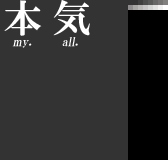
<style>
.page{position:relative;width:168px;height:160px;background:#333333}
.page>*{position:absolute;margin:0}
.t1{font:39px "HGPMinchoE";letter-spacing:0.025em;color:#ffffff}
.t2{font:12px "HGPMinchoE";letter-spacing:0.025em;color:#ffffff;font-style:italic}
</style>
<div class="page">
<p class="t1" style="left:4px;top:0px;width:86px;height:36px">本 気</p>
<p class="t2" style="left:12px;top:37px;width:66px;height:11px">my.       all.</p>
</div>
